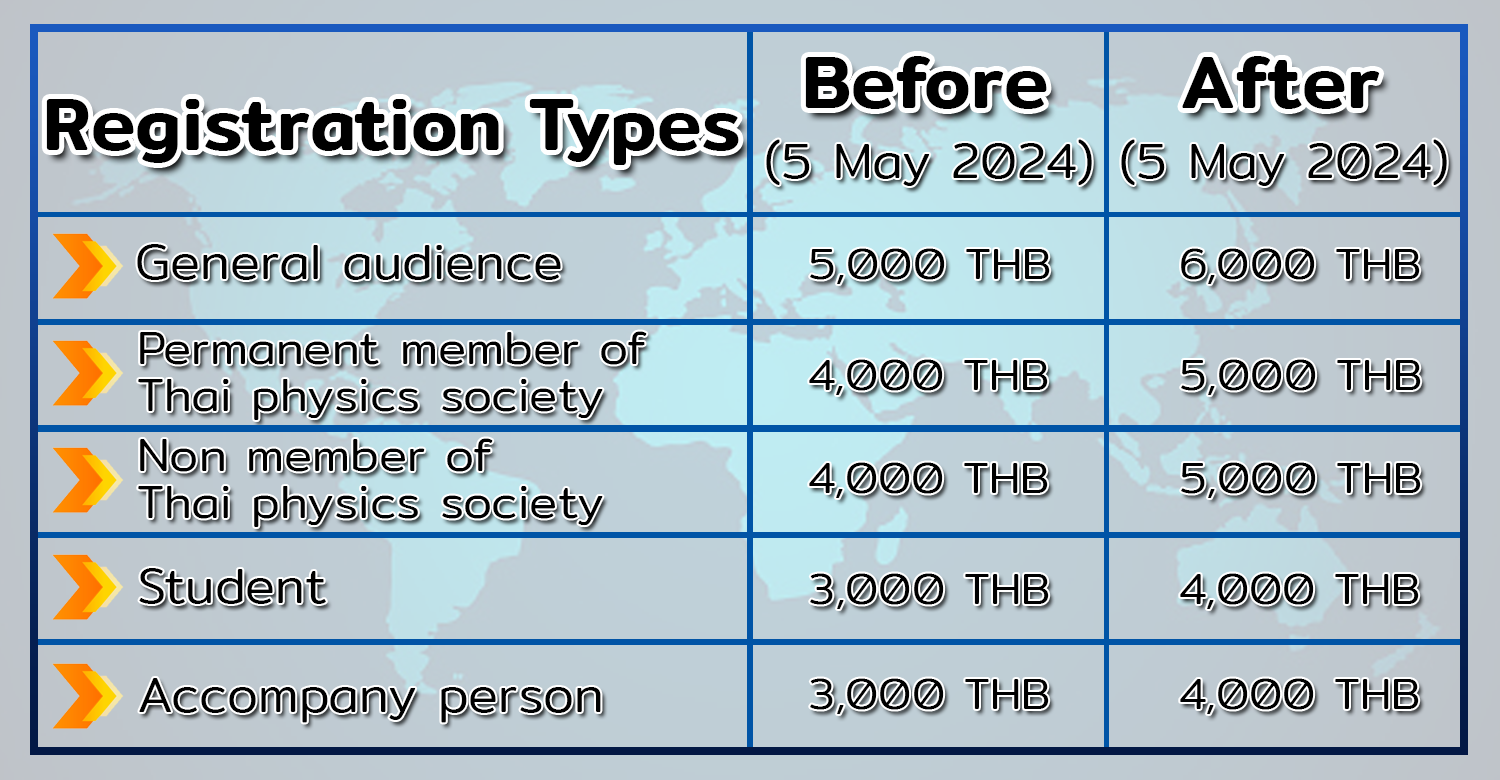
<style>
.page{position:relative;width:1500px;height:780px}
.page>*{position:absolute;margin:0}
.t1{font:75px "Mitr-Medium";color:#000000}
.t2{font:50px "Mitr-Light";color:#000000}
.t3{font:45px "Mitr-Light";color:#000000}
.t4{font:46.9px/46.9px "Mitr-Light";color:#000000}
</style>
<div class="page">
<p class="t1" style="left:805px;top:56px;width:242px;height:53px">Before</p>
<p class="t1" style="left:1182px;top:56px;width:198px;height:53px">After</p>
<p class="t1" style="left:46px;top:99px;width:693px;height:66px">Registration Types</p>
<p class="t2" style="left:766px;top:139px;width:326px;height:47px">(5 May 2024)</p>
<p class="t2" style="left:1121px;top:139px;width:326px;height:47px">(5 May 2024)</p>
<p class="t2" style="left:137px;top:244px;width:424px;height:36px">General audience</p>
<p class="t3" style="left:810px;top:248px;width:240px;height:36px">5,000 THB</p>
<p class="t3" style="left:1181px;top:248px;width:239px;height:36px">6,000 THB</p>
<p class="t4" style="left:138px;top:331px;width:509px;height:89px">Permanent member of <br>Thai physics society</p>
<p class="t3" style="left:809px;top:359px;width:239px;height:36px">4,000 THB</p>
<p class="t3" style="left:1181px;top:359px;width:240px;height:36px">5,000 THB</p>
<p class="t4" style="left:138px;top:438px;width:465px;height:89px">Non member of <br>Thai physics society</p>
<p class="t3" style="left:809px;top:462px;width:239px;height:36px">4,000 THB</p>
<p class="t3" style="left:1181px;top:462px;width:240px;height:36px">5,000 THB</p>
<p class="t2" style="left:139px;top:568px;width:187px;height:36px">Student</p>
<p class="t3" style="left:810px;top:573px;width:239px;height:36px">3,000 THB</p>
<p class="t3" style="left:1180px;top:573px;width:239px;height:36px">4,000 THB</p>
<p class="t2" style="left:139px;top:678px;width:462px;height:45px">Accompany person</p>
<p class="t3" style="left:810px;top:678px;width:239px;height:36px">3,000 THB</p>
<p class="t3" style="left:1180px;top:678px;width:239px;height:36px">4,000 THB</p>
</div>
